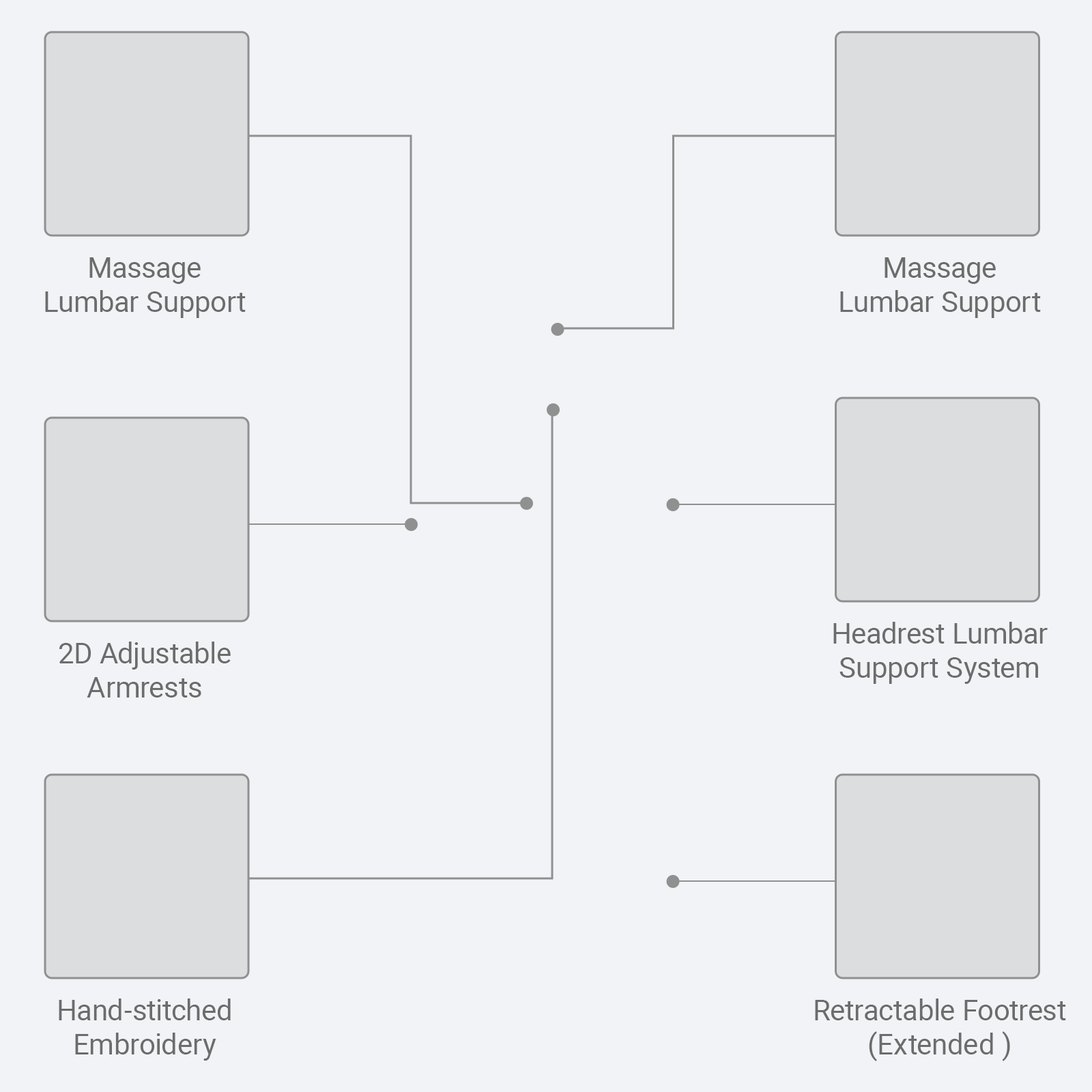
<style>
.page{position:relative;width:1092px;height:1092px;background:#f2f3f6}
.page>*{position:absolute;margin:0}
.t1{font:28.7px "Roboto-Regular";color:#6c6c6c}
</style>
<div class="page">
<p class="t1" style="left:45px;top:257px;width:201px;height:61px;text-align:center">Massage<br>Lumbar Support</p>
<p class="t1" style="left:840px;top:257px;width:201px;height:61px;text-align:center">Massage<br>Lumbar Support</p>
<p class="t1" style="left:833px;top:622px;width:215px;height:62px;text-align:center">Headrest Lumbar<br>Support System</p>
<p class="t1" style="left:59px;top:642px;width:172px;height:56px;text-align:center">2D Adjustable<br>Armrests</p>
<p class="t1" style="left:59px;top:998px;width:172px;height:63px;text-align:center">Hand-stitched<br>Embroidery</p>
<p class="t1" style="left:815px;top:998px;width:251px;height:63px;text-align:center">Retractable Footrest<br>(Extended )</p>
</div>
